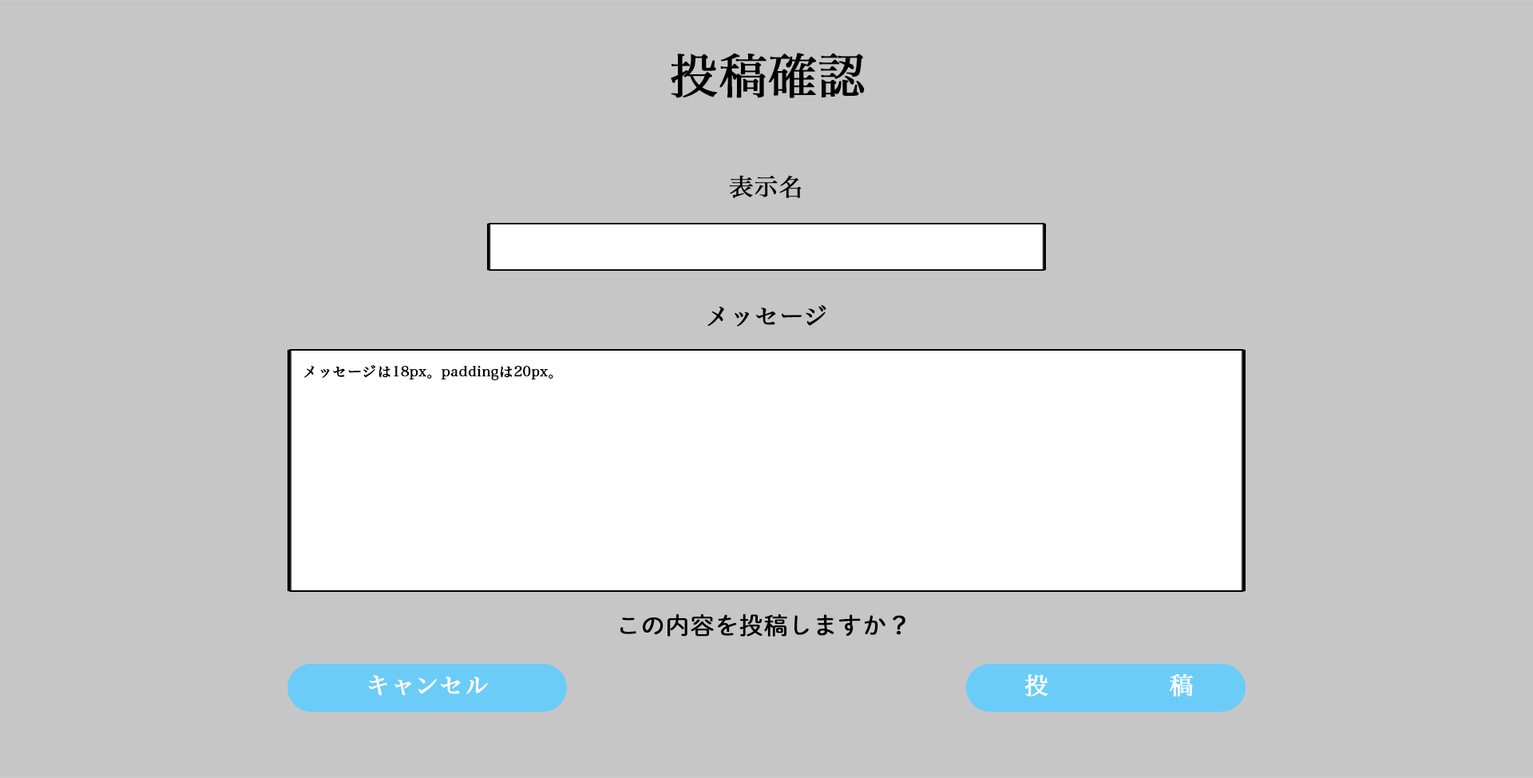
<style>
.page{position:relative;width:1533px;height:778px;background:#c6c6c6}
.page>*{position:absolute;margin:0}
.t1{font:47.9px "HiraMinPro-W3";color:#000000;font-weight:bold}
.t2{font:24px "HiraMinPro-W3";color:#000000;font-weight:bold}
.t3{font:14.4px "HiraMinPro-W3";color:#000000;font-weight:bold}
.t4{font:24px "DNPShueiMGoStd-L";color:#000000;font-weight:bold}
.t5{font:24px "HiraMinPro-W3";color:#ffffff;font-weight:bold}
</style>
<div class="page">
<p class="t1" style="left:671px;top:53px;width:194px;height:45px">投稿確認</p>
<p class="t2" style="left:729px;top:175px;width:73px;height:24px">表示名</p>
<p class="t2" style="left:707px;top:305px;width:119px;height:22px">メッセージ</p>
<p class="t3" style="left:304px;top:364px;width:249px;height:16px">メッセージは18px。paddingは20px。</p>
<p class="t4" style="left:620px;top:613px;width:286px;height:23px">この内容を投稿しますか？</p>
<p class="t5" style="left:369px;top:675px;width:119px;height:21px">キャンセル</p>
<p class="t5" style="left:1025px;top:673px;width:169px;height:23px">投稿</p>
</div>
